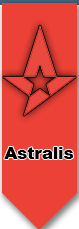
<style>
.page{position:relative;width:79px;height:229px;background:#ec4136}
.page>*{position:absolute;margin:0}
.t1{font:16.7px "Arial-Black";letter-spacing:-0.01em;color:#000000}
</style>
<div class="page">
<p class="t1" style="left:4px;top:147px;width:70px;height:12px">Astralis</p>
</div>
